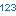
<style>
.page{position:relative;width:16px;height:16px;background:#ffffff}
.page>*{position:absolute;margin:0}
.t1{font:10px "Arial-BoldMT";color:#206aa3}
</style>
<div class="page">
<p class="t1" style="left:0px;top:4px;width:16px;height:7px">123</p>
</div>
